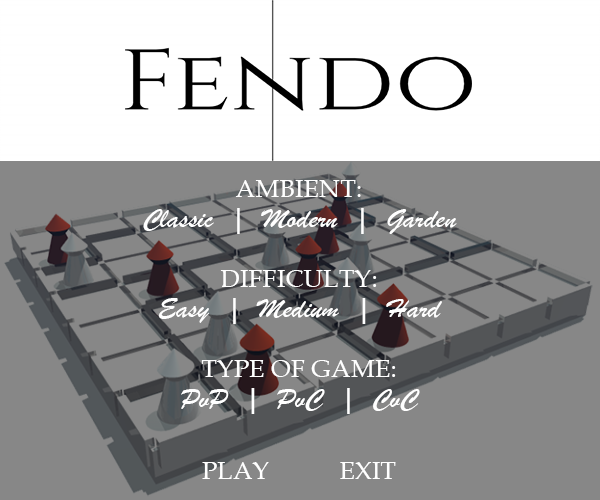
<style>
.page{position:relative;width:600px;height:500px;background:#878787}
.page>*{position:absolute;margin:0}
.t1{font:28px/30px "BrushScriptMT";color:#ffffff;scale:1.06 1}
.t2{font:24px/30px "BookAntiqua";color:#ffffff;scale:1.06 1}
.t3{font:24px/24px "BookAntiqua";color:#ffffff;scale:1.06 1}
</style>
<div class="page">
<p class="t1" style="left:143px;top:180px;width:314px;height:299px;text-align:center"><span class="t2">AMBIENT:<br></span>Classic  |  Modern  |  Garden<br><span class="t2"><br>DIFFICULTY: <br></span>Easy  |  Medium  |  Hard<br><span class="t2"><br>TYPE OF GAME: <br></span>PvP  |  PvC  |  CvC<br><span class="t3"><br><br>PLAY           EXIT</span></p>
</div>
